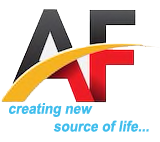
<style>
.page{position:relative;width:160px;height:142px;background:#ffffff}
.page>*{position:absolute;margin:0}
.t1{font:14.8px "Arial-BoldMT";color:#40bdec;font-style:italic;scale:0.92 1}
</style>
<div class="page">
<p class="t1" style="left:9px;top:103px;width:140px;height:29px">creating new <br>            source of life...</p>
</div>
